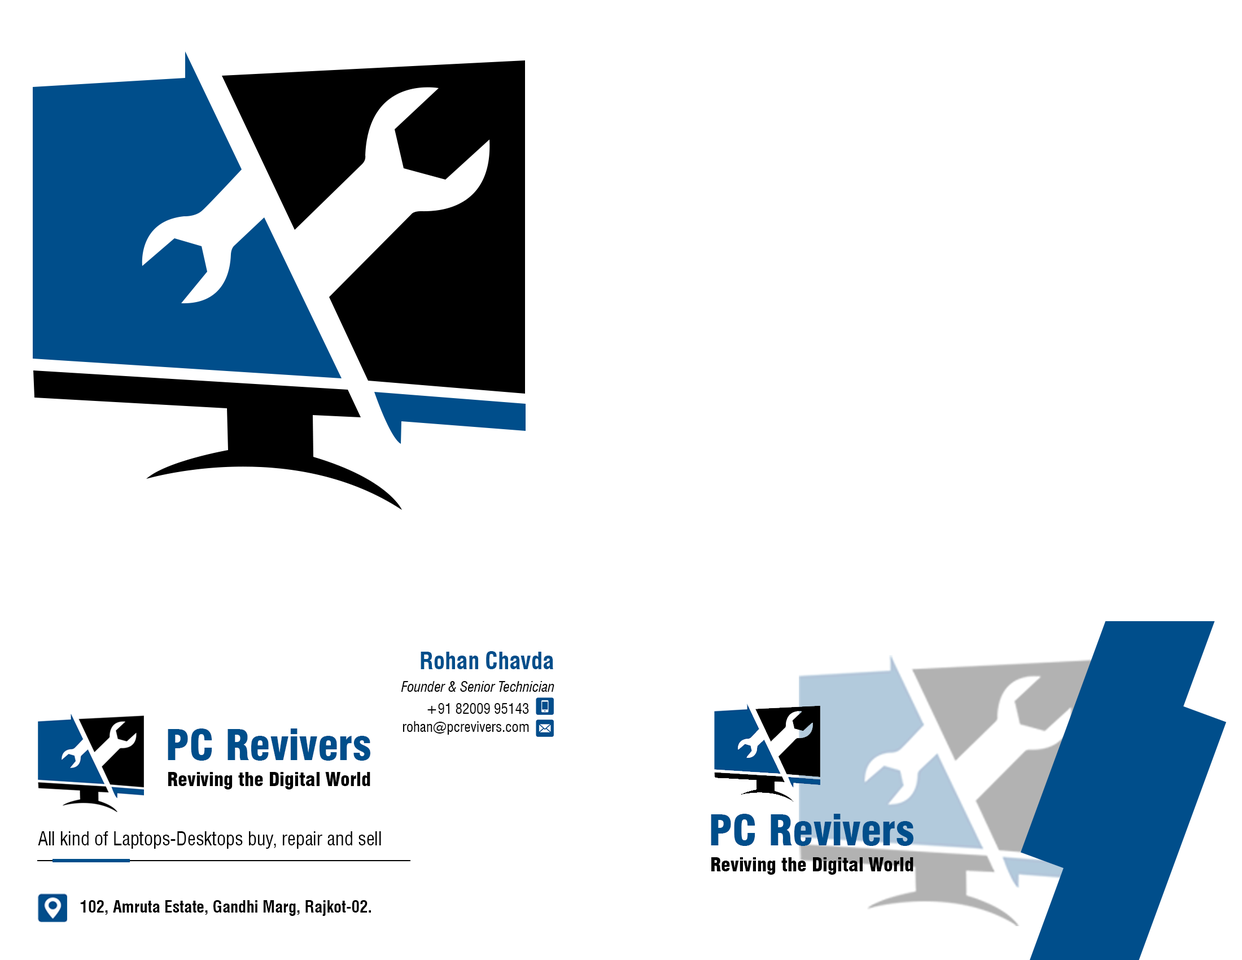
<style>
.page{position:relative;width:1242px;height:960px;background:#ffffff}
.page>*{position:absolute;margin:0}
.t1{font:23.5px "Swiss721BT-BoldCondensed";color:#004e8b}
.t2{font:14.1px "Swiss721BT-ItalicCondensed";color:#000000}
.t3{font:14.1px "Swiss721BT-RomanCondensed";color:#000000}
.t4{font:41.7px "Swiss721BT-BlackCondensed";color:#004e8b}
.t5{font:18.9px "Swiss721BT-BlackCondensed";color:#000000}
.t6{font:18.8px "Swiss721BT-RomanCondensed";color:#000000}
.t7{font:16.5px "Swiss721BT-BoldCondensed";color:#000000}
</style>
<div class="page">
<p class="t1" style="left:421px;top:651px;width:132px;height:18px">Rohan Chavda</p>
<p class="t2" style="left:401px;top:681px;width:153px;height:11px">Founder &amp; Senior Technician</p>
<p class="t3" style="left:427px;top:703px;width:102px;height:11px">+91 82009 95143</p>
<p class="t3" style="left:403px;top:721px;width:126px;height:14px">rohan@pcrevivers.com</p>
<p class="t4" style="left:168px;top:728px;width:202px;height:33px">PC Revivers</p>
<p class="t5" style="left:168px;top:772px;width:202px;height:17px">Reviving the Digital World</p>
<p class="t4" style="left:711px;top:814px;width:203px;height:32px">PC Revivers</p>
<p class="t6" style="left:38px;top:831px;width:343px;height:18px">All kind of Laptops-Desktops buy, repair and sell</p>
<p class="t5" style="left:711px;top:857px;width:203px;height:18px">Reviving the Digital World</p>
<p class="t7" style="left:80px;top:900px;width:291px;height:16px">102, Amruta Estate, Gandhi Marg, Rajkot-02.</p>
</div>
